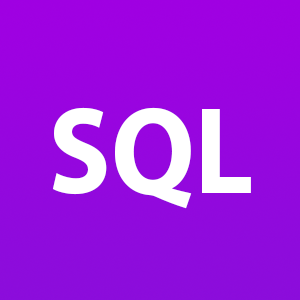
<style>
.page{position:relative;width:300px;height:300px}
.page>*{position:absolute;margin:0}
.t1{font:125px "MyriadPro-Bold";color:#ffffff;scale:0.93 1}
</style>
<div class="page">
<p class="t1" style="left:52px;top:107px;width:199px;height:102px">SQL</p>
</div>
